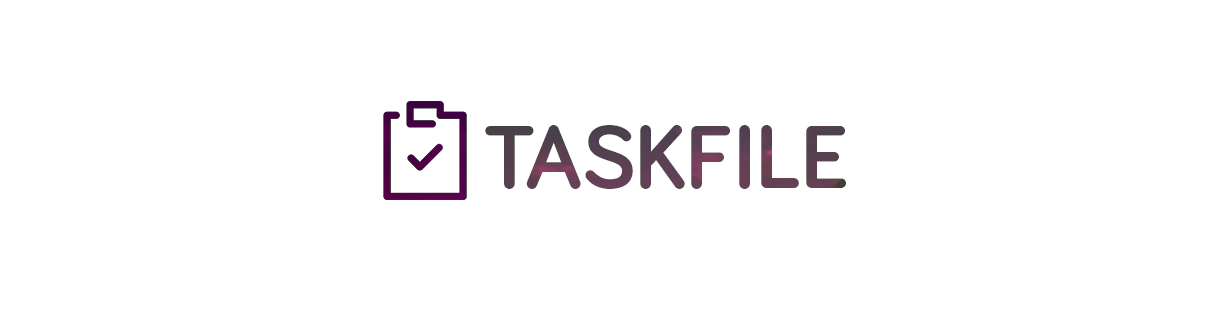
<style>
.page{position:relative;width:1220px;height:315px;background:#ffffff}
.page>*{position:absolute;margin:0}
.t1{font:157.9px "Bariol-Bold";color:#5b4052}
</style>
<div class="page">
<p class="t1" style="left:485px;top:125px;width:361px;height:64px">TASKFILE</p>
</div>
